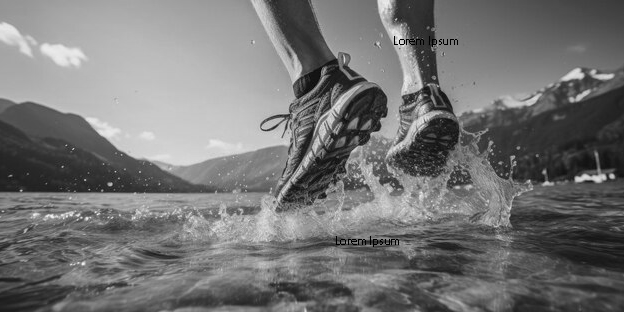
<style>
.page{position:relative;width:624px;height:312px}
.page>*{position:absolute;margin:0}
.t1{font:12px "MyriadHebrew-Regular";color:#000000}
</style>
<div class="page">
<p class="t1" style="left:394px;top:36px;width:64px;height:11px">Lorem Ipsum</p>
<p class="t1" style="left:336px;top:236px;width:63px;height:11px">Lorem Ipsum</p>
</div>
